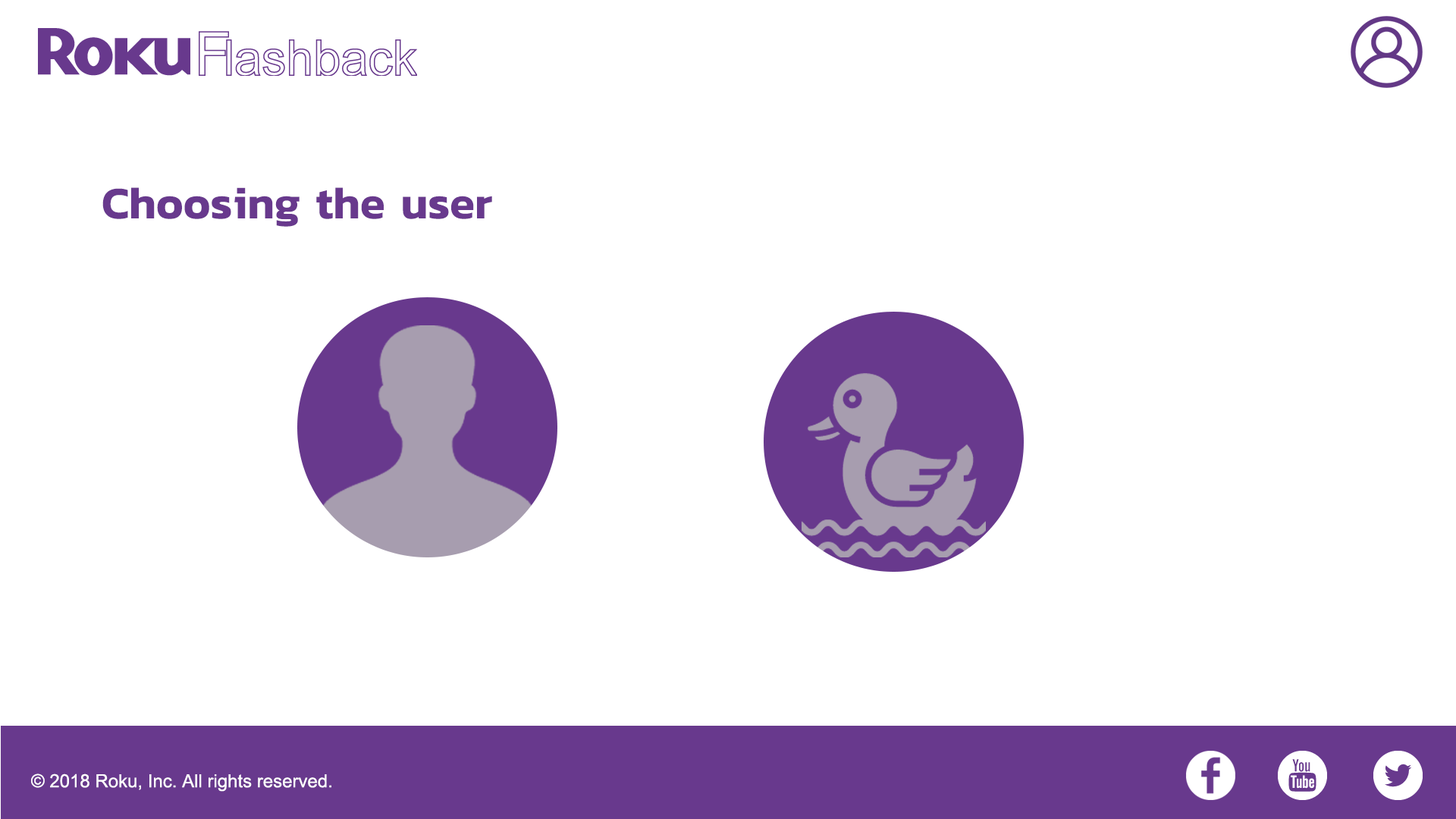
<style>
.page{position:relative;width:1456px;height:819px;background:#ffffff}
.page>*{position:absolute;margin:0}
.t1{font:45.5px "Kanit-SemiBold";color:#68398d}
.t2{font:18.2px "ArialMT";color:#ffffff}
</style>
<div class="page">
<p class="t1" style="left:102px;top:187px;width:390px;height:40px">Choosing the user</p>
<p class="t2" style="left:31px;top:773px;width:300px;height:19px">© 2018 Roku, Inc. All rights reserved.</p>
</div>
